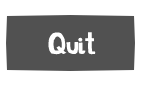
<style>
.page{position:relative;width:142px;height:85px;background:#515151}
.page>*{position:absolute;margin:0}
.t1{font:24px "SimpleLife";color:#ffffff}
</style>
<div class="page">
<p class="t1" style="left:48px;top:32px;width:48px;height:23px">Quit</p>
</div>
